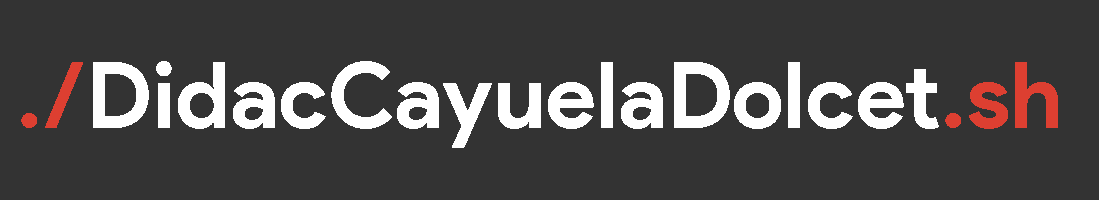
<style>
.page{position:relative;width:1099px;height:200px;background:#333333}
.page>*{position:absolute;margin:0}
.t1{font:91.7px "ProductSans-Bold";color:#ffffff}
.t2{font:91.7px "ProductSans-Bold";color:#dd3f31}
</style>
<div class="page">
<p class="t1" style="left:21px;top:61px;width:1037px;height:87px"><span class="t2">./</span>DidacCayuelaDolcet<span class="t2">.sh</span></p>
</div>
